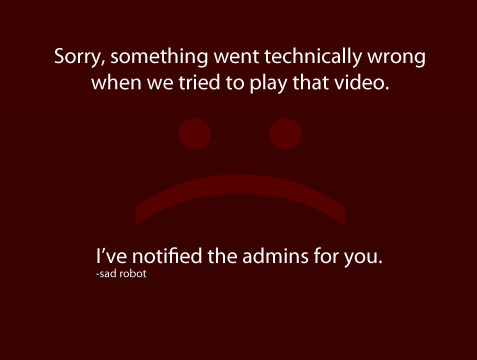
<style>
.page{position:relative;width:477px;height:360px;background:#370200}
.page>*{position:absolute;margin:0}
.t1{font:21.8px "MyriadPro-Regular";color:#ffffff}
.t2{font:256.8px "MyriadPro-Regular";color:#570000}
.t3{font:11.8px "MyriadPro-Regular";color:#ffffff}
</style>
<div class="page">
<p class="t1" style="left:54px;top:47px;width:371px;height:47px;text-align:center">Sorry, something went technically wrong<br>when we tried to play that video.</p>
<p class="t2" style="left:135px;top:118px;width:210px;height:108px;rotate:90deg">:(</p>
<p class="t1" style="left:96px;top:247px;width:286px;height:31px">I’ve notified the admins for you.<br><span class="t3">-sad robot</span></p>
</div>
